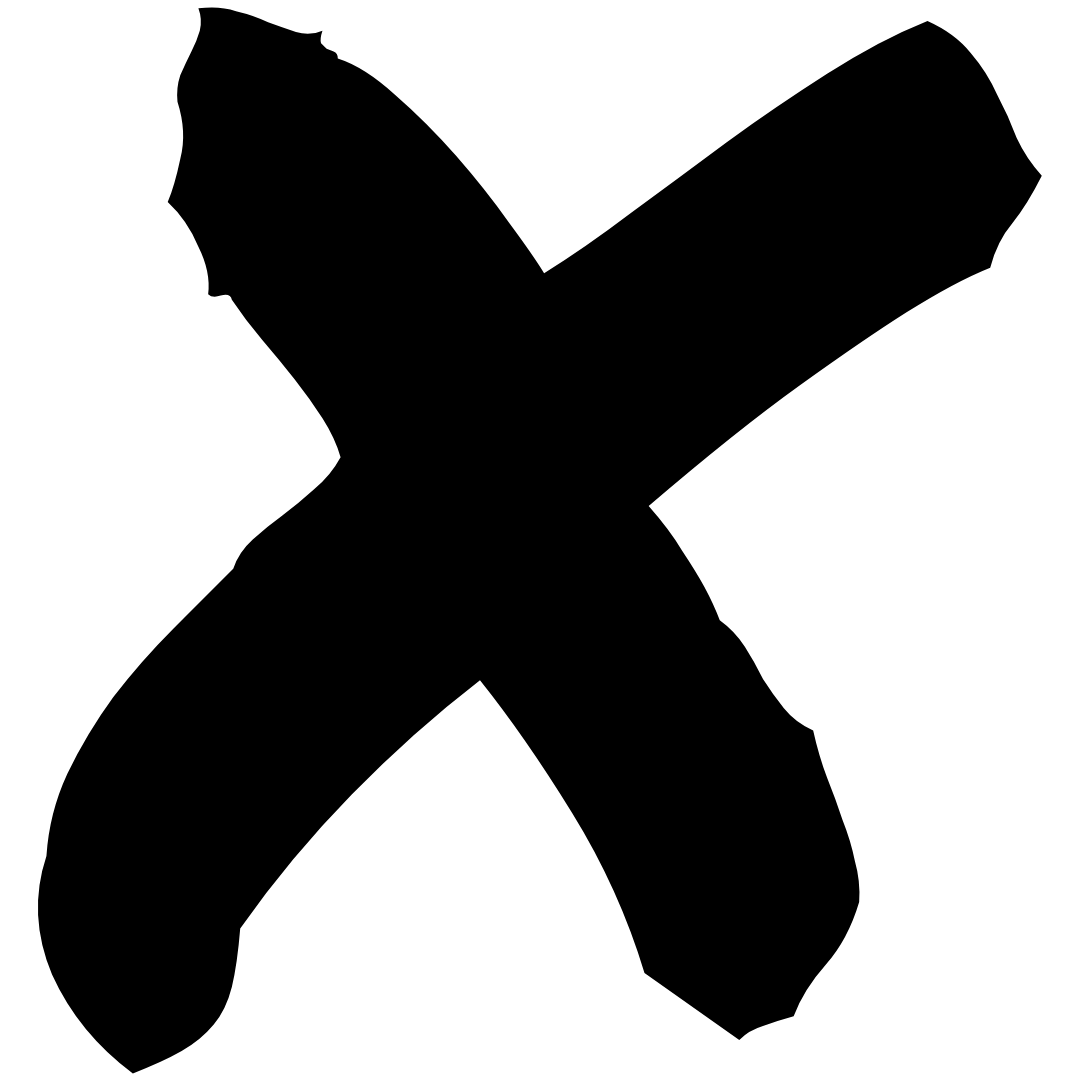
<style>
.page{position:relative;width:1080px;height:1080px;background:#ffffff}
.page>*{position:absolute;margin:0}
.t1{font:1427.5px "PermanentMarker-Regular";color:#000000}
</style>
<div class="page">
<p class="t1" style="left:38px;top:7px;width:1004px;height:1067px">X</p>
</div>
